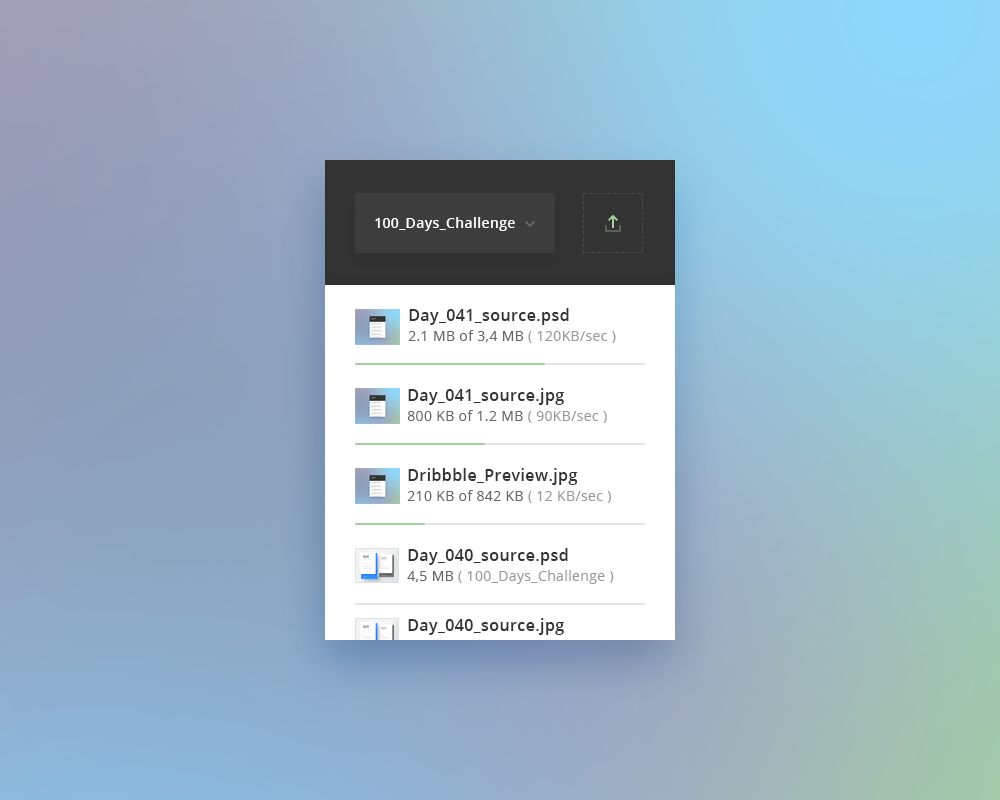
<style>
.page{position:relative;width:1000px;height:800px}
.page>*{position:absolute;margin:0}
.t1{font:14px "OpenSans-Semibold";letter-spacing:0.025em;color:#ffffff}
.t2{font:16px "OpenSans-Semibold";letter-spacing:0.025em;color:#333333}
.t3{font:14px "OpenSans";letter-spacing:0.025em;color:#666666}
.t4{font:14px "OpenSans";letter-spacing:0.025em;color:#999999}
</style>
<div class="page">
<p class="t1" style="left:375px;top:217px;width:140px;height:14px">100_Days_Challenge</p>
<p class="t2" style="left:409px;top:308px;width:160px;height:17px">Day_041_source.psd</p>
<p class="t3" style="left:408px;top:330px;width:208px;height:13px">2.1 MB of 3,4 MB<span class="t4"> ( 120KB/sec )</span></p>
<p class="t2" style="left:408px;top:388px;width:156px;height:17px">Day_041_source.jpg</p>
<p class="t3" style="left:407px;top:410px;width:200px;height:13px">800 KB of 1.2 MB<span class="t4"> ( 90KB/sec )</span></p>
<p class="t2" style="left:408px;top:468px;width:170px;height:17px">Dribbble_Preview.jpg</p>
<p class="t3" style="left:407px;top:490px;width:204px;height:13px">210 KB of 842 KB<span class="t4"> ( 12 KB/sec )</span></p>
<p class="t2" style="left:408px;top:548px;width:160px;height:17px">Day_040_source.psd</p>
<p class="t4" style="left:407px;top:570px;width:207px;height:14px"><span class="t3">4,5 MB</span> ( 100_Days_Challenge )</p>
<p class="t2" style="left:408px;top:618px;width:156px;height:17px">Day_040_source.jpg</p>
</div>
